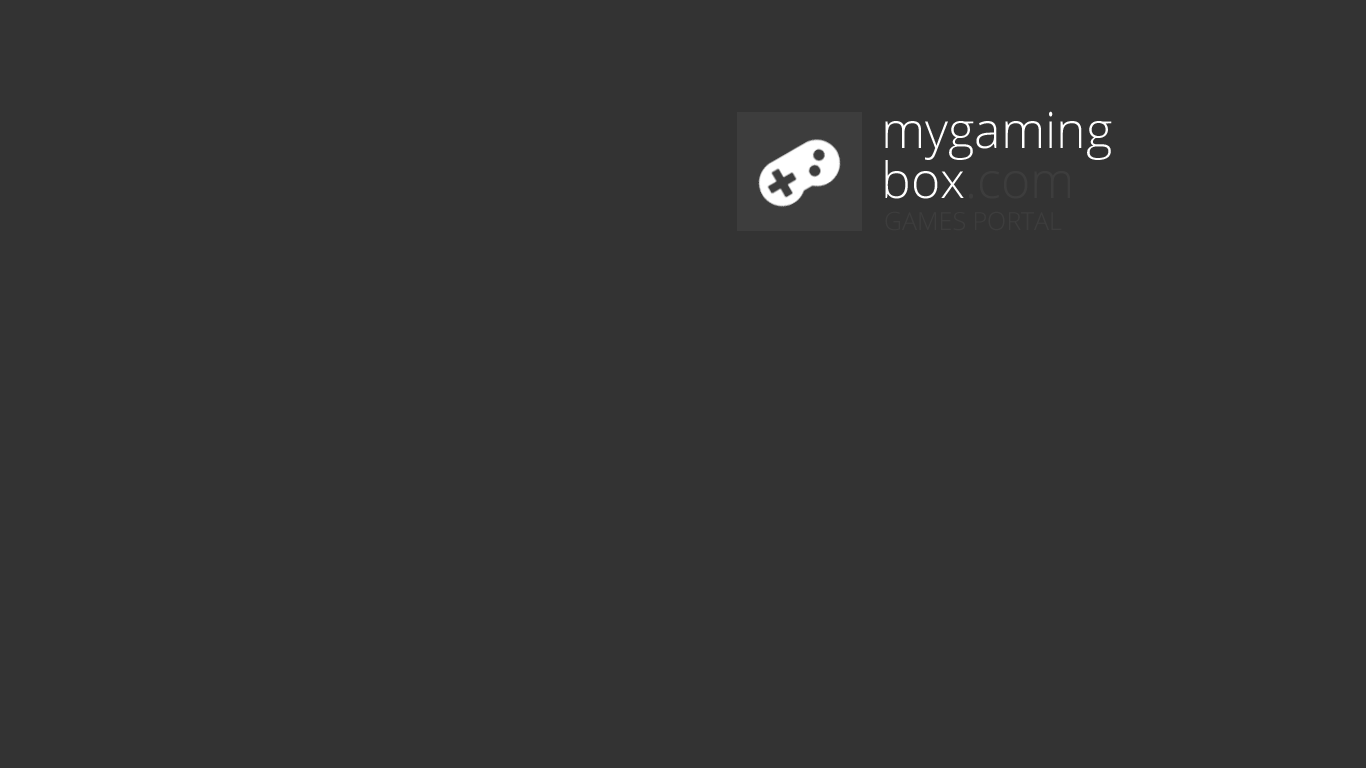
<style>
.page{position:relative;width:1366px;height:768px;background:#333333}
.page>*{position:absolute;margin:0}
.t1{font:50px/50px "OpenSans-Light";color:#ffffff}
.t2{font:50px/50px "OpenSans-Light";color:#3d3d3d}
.t3{font:25px "OpenSans-Light";color:#3d3d3d;text-transform:uppercase}
</style>
<div class="page">
<p class="t1" style="left:885px;top:111px;width:227px;height:88px">mygaming<br>box<span class="t2">.com</span></p>
<p class="t3" style="left:885px;top:211px;width:177px;height:20px">Games portal</p>
</div>
